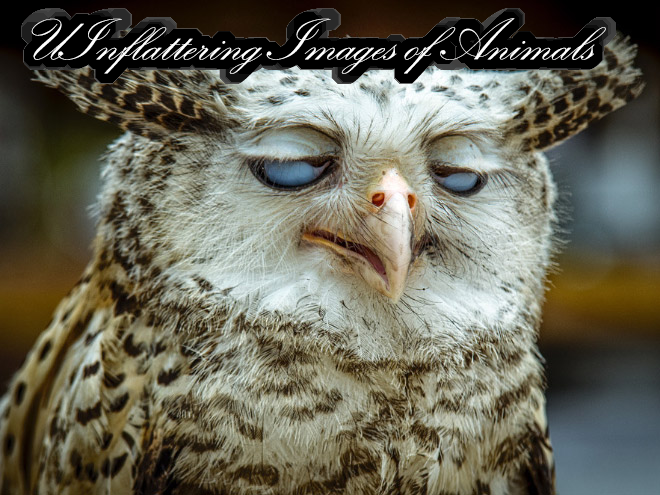
<style>
.page{position:relative;width:660px;height:495px}
.page>*{position:absolute;margin:0}
.t1{font:60px "KunstlerScript";color:#ffffff}
</style>
<div class="page">
<p class="t1" style="left:31px;top:18px;width:575px;height:56px">UInflattering Images of Animals</p>
</div>
